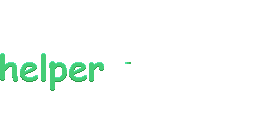
<style>
.page{position:relative;width:256px;height:127px;background:#ffffff}
.page>*{position:absolute;margin:0}
.t1{font:36px "ComicSansMS-Bold";color:#44cd76}
</style>
<div class="page">
<p class="t1" style="left:0px;top:53px;width:104px;height:38px">helper</p>
</div>
